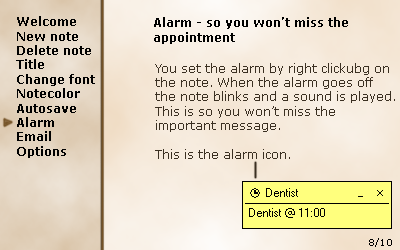
<style>
.page{position:relative;width:400px;height:250px}
.page>*{position:absolute;margin:0}
.t1{font:12px "Verdana-Bold";color:#010101}
.t2{font:12px "Verdana-Bold";color:#000000}
.t3{font:12px "Verdana";color:#3b3022}
.t4{font:9px "Verdana";color:#000000}
</style>
<div class="page">
<p class="t1" style="left:16px;top:16px;width:79px;height:142px">Welcome<br>New note<br>Delete note<br>Title<br>Change font<br>Notecolor<br>Autosave<br>Alarm<br>Email<br>Options</p>
<p class="t2" style="left:154px;top:17px;width:194px;height:27px">Alarm - so you won’t miss the appointment</p>
<p class="t3" style="left:155px;top:63px;width:240px;height:96px">You set the alarm by right clickubg on the note. When the alarm goes off<br>the note blinks and a sound is played. This is so you won’t miss the<br>important message.<br><br>This is the alarm icon.</p>
<p class="t4" style="left:369px;top:238px;width:23px;height:9px">8/10</p>
</div>
